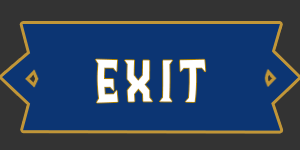
<style>
.page{position:relative;width:300px;height:150px;background:#0c3573}
.page>*{position:absolute;margin:0}
.t1{font:62.5px "Lorde-Havana";letter-spacing:0.1em;color:#ffffff;scale:0.75 1}
</style>
<div class="page">
<p class="t1" style="left:95px;top:59px;width:111px;height:44px">Exit</p>
</div>
